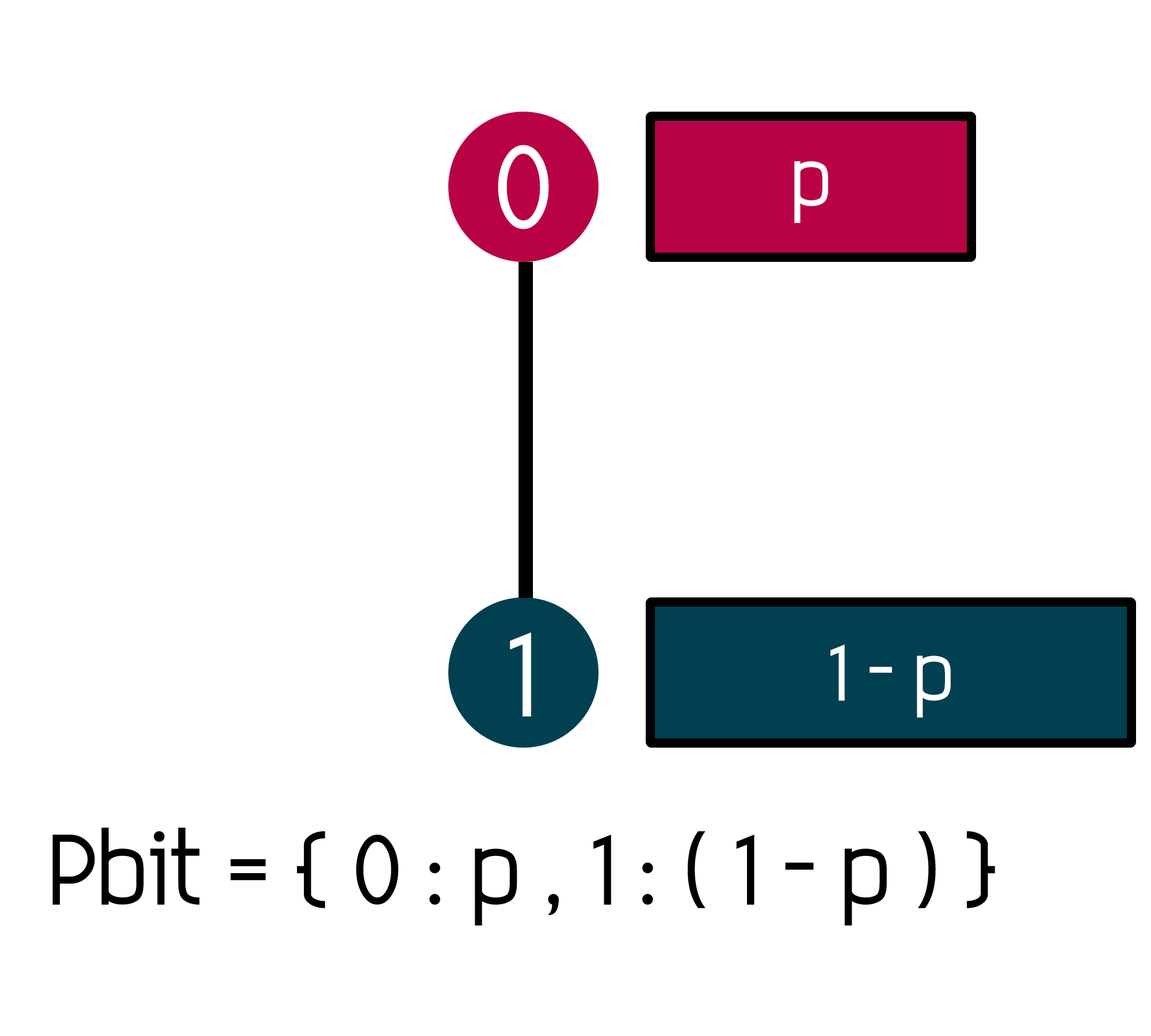
<style>
.page{position:relative;width:1151px;height:1036px;background:#ffffff}
.page>*{position:absolute;margin:0}
.t1{font:85.7px "EleganTech";color:#ffffff}
.t2{font:57.2px "EleganTech";color:#ffffff}
.t3{font:71.5px "EleganTech";color:#000000}
</style>
<div class="page">
<p class="t1" style="left:498px;top:145px;width:51px;height:84px">0</p>
<p class="t2" style="left:794px;top:161px;width:34px;height:62px">p</p>
<p class="t1" style="left:510px;top:633px;width:21px;height:84px">1</p>
<p class="t2" style="left:830px;top:645px;width:121px;height:73px">1 - p</p>
<p class="t3" style="left:52px;top:828px;width:943px;height:97px">Pbit = { 0 : p , 1 : ( 1 - p ) }</p>
</div>
